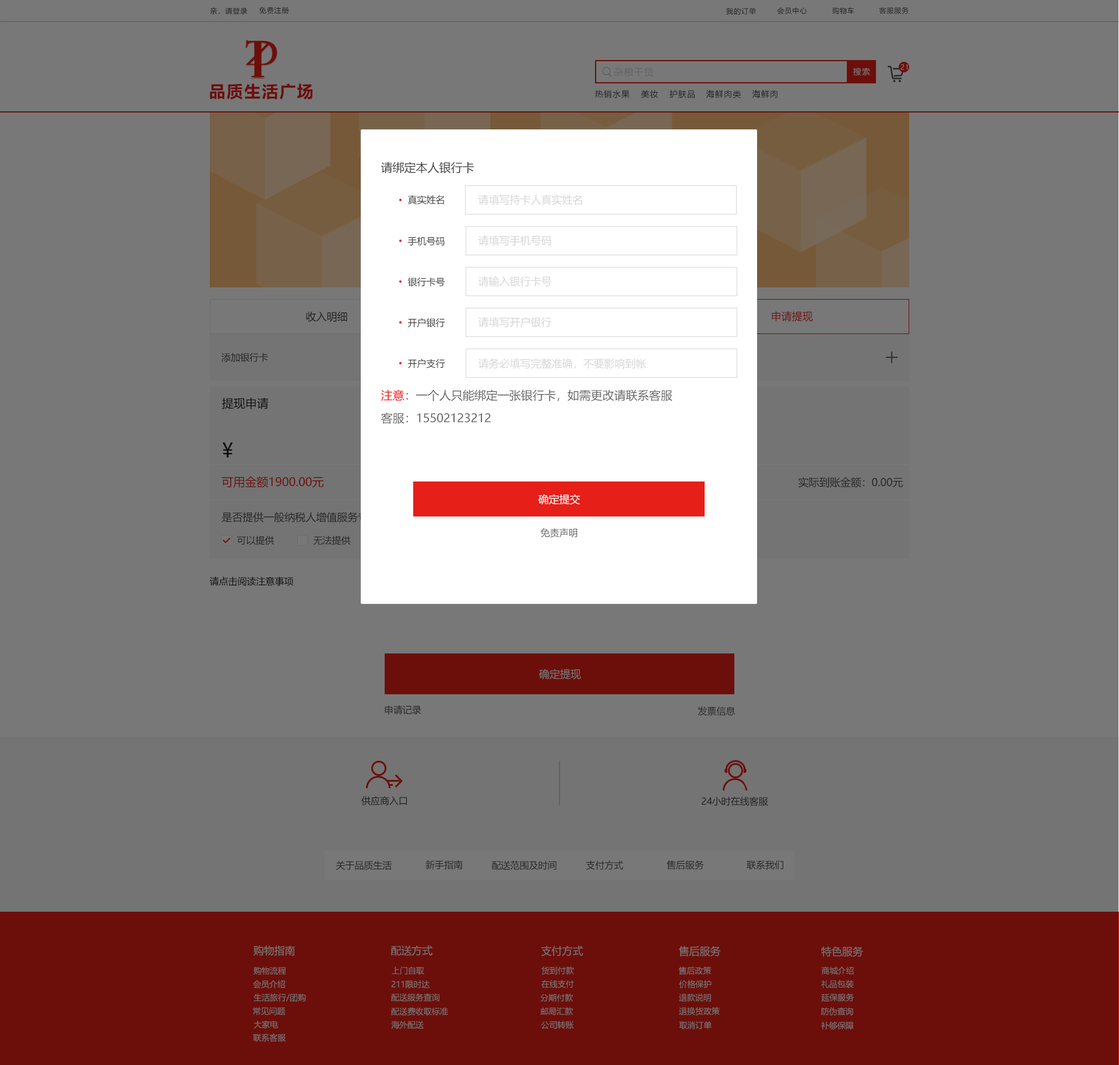
<style>
.page{position:relative;width:1119px;height:1065px;background:#787878}
.page>*{position:absolute;margin:0}
.t1{font:7px "MicrosoftYaHei";letter-spacing:0.08em;color:#1e1e1e}
.t2{font:7px "MicrosoftYaHei";letter-spacing:0.08em;color:#787878}
.t3{font:9.3px "MicrosoftYaHei";letter-spacing:0.08em;color:#656565}
.t4{font:8.2px "MicrosoftYaHei";letter-spacing:0.08em;color:#787878}
.t5{font:16.3px "MicrosoftYaHei-Bold";letter-spacing:0.08em;color:#6c0f0b}
.t6{font:8.2px "MicrosoftYaHei";letter-spacing:0.08em;color:#1e1e1e}
.t7{font:11.7px "MicrosoftYaHei";color:#404040;text-transform:uppercase}
.t8{font:9.3px "MicrosoftYaHei";color:#404040;text-transform:uppercase}
.t9{font:10.5px "MicrosoftYaHei";color:#d6d6d6;text-transform:uppercase}
.t10{font:10.5px "MicrosoftYaHei";color:#1e1e1e}
.t11{font:10.5px "MicrosoftYaHei";color:#6c0f0b}
.t12{font:9.3px "MicrosoftYaHei";color:#262626}
.t13{font:11.7px "MicrosoftYaHei";color:#666666;text-transform:uppercase}
.t14{font:11.7px "MicrosoftYaHei";color:#e61f18;text-transform:uppercase}
.t15{font:11.7px "MicrosoftYaHei";color:#202020}
.t16{font:19.8px "MicrosoftYaHei";color:#202020}
.t17{font:11.7px "MicrosoftYaHei";color:#6c0f0b}
.t18{font:10.5px "MicrosoftYaHei";color:#262626}
.t19{font:10.5px "MicrosoftYaHei";color:#ffffff;text-transform:uppercase}
.t20{font:9.3px "MicrosoftYaHei";color:#666666;text-transform:uppercase}
.t21{font:9.3px "MicrosoftYaHei";color:#202020}
.t22{font:10.5px "MicrosoftYaHei";color:#787878}
.t23{font:9.3px "MicrosoftYaHei";color:#1e1e1e}
.t24{font:8.2px "MicrosoftYaHei";color:#787878}
</style>
<div class="page">
<p class="t1" style="left:210px;top:7px;width:37px;height:8px">亲，请登录</p>
<p class="t1" style="left:259px;top:7px;width:30px;height:7px">免费注册</p>
<p class="t1" style="left:726px;top:8px;width:30px;height:7px">我的订单</p>
<p class="t1" style="left:777px;top:7px;width:31px;height:8px">会员中心</p>
<p class="t1" style="left:833px;top:7px;width:22px;height:8px">购物车</p>
<p class="t1" style="left:879px;top:7px;width:31px;height:7px">客服服务</p>
<p class="t2" style="left:901px;top:64px;width:7px;height:6px">21</p>
<p class="t3" style="left:614px;top:67px;width:40px;height:10px">杂粮干货</p>
<p class="t4" style="left:854px;top:68px;width:16px;height:8px">搜索</p>
<p class="t5" style="left:210px;top:83px;width:103px;height:17px">品质生活广场</p>
<p class="t6" style="left:595px;top:90px;width:35px;height:9px">热销水果</p>
<p class="t6" style="left:641px;top:90px;width:17px;height:8px">美妆</p>
<p class="t6" style="left:670px;top:90px;width:25px;height:9px">护肤品</p>
<p class="t6" style="left:706px;top:90px;width:36px;height:9px">海鲜肉类</p>
<p class="t6" style="left:752px;top:90px;width:26px;height:9px">海鲜肉</p>
<p class="t7" style="left:381px;top:162px;width:93px;height:12px">请绑定本人银行卡</p>
<p class="t8" style="left:408px;top:195px;width:36px;height:10px">真实姓名</p>
<p class="t9" style="left:478px;top:195px;width:104px;height:10px">请填写持卡人真实姓名</p>
<p class="t8" style="left:408px;top:237px;width:37px;height:9px">手机号码</p>
<p class="t9" style="left:478px;top:236px;width:74px;height:10px">请填写手机号码</p>
<p class="t8" style="left:408px;top:277px;width:37px;height:10px">银行卡号</p>
<p class="t9" style="left:478px;top:276px;width:74px;height:11px">请输入银行卡号</p>
<p class="t10" style="left:306px;top:311px;width:41px;height:11px">收入明细</p>
<p class="t8" style="left:408px;top:318px;width:37px;height:10px">开户银行</p>
<p class="t9" style="left:478px;top:317px;width:74px;height:11px">请填写开户银行</p>
<p class="t11" style="left:772px;top:311px;width:41px;height:11px">申请提现</p>
<p class="t12" style="left:222px;top:353px;width:46px;height:9px">添加银行卡</p>
<p class="t8" style="left:408px;top:359px;width:37px;height:9px">开户支行</p>
<p class="t9" style="left:478px;top:358px;width:168px;height:11px">请务必填写完整准确，不要影响到帐</p>
<p class="t13" style="left:381px;top:389px;width:292px;height:12px"><span class="t14">注意：</span>一个人只能绑定一张银行卡，如需更改请联系客服</p>
<p class="t15" style="left:222px;top:398px;width:47px;height:11px">提现申请</p>
<p class="t13" style="left:381px;top:412px;width:110px;height:12px">客服：15502123212</p>
<p class="t16" style="left:222px;top:443px;width:11px;height:15px">¥</p>
<p class="t17" style="left:222px;top:476px;width:102px;height:12px">可用金额1900.00元</p>
<p class="t18" style="left:799px;top:477px;width:105px;height:11px">实际到账金额：0.00元</p>
<p class="t19" style="left:538px;top:494px;width:42px;height:11px">确定提交</p>
<p class="t20" style="left:540px;top:528px;width:38px;height:10px">免责声明</p>
<p class="t12" style="left:237px;top:536px;width:38px;height:9px">可以提供</p>
<p class="t12" style="left:313px;top:536px;width:38px;height:9px">无法提供</p>
<p class="t21" style="left:210px;top:577px;width:84px;height:9px">请点击阅读注意事项</p>
<p class="t22" style="left:539px;top:669px;width:42px;height:11px">确定提现</p>
<p class="t12" style="left:385px;top:705px;width:37px;height:10px">申请记录</p>
<p class="t12" style="left:698px;top:707px;width:38px;height:9px">发票信息</p>
<p class="t23" style="left:361px;top:796px;width:46px;height:10px">供应商入口</p>
<p class="t23" style="left:702px;top:796px;width:66px;height:10px">24小时在线客服</p>
<p class="t12" style="left:336px;top:861px;width:56px;height:9px">关于品质生活</p>
<p class="t12" style="left:426px;top:860px;width:37px;height:10px">新手指南</p>
<p class="t12" style="left:492px;top:861px;width:65px;height:9px">配送范围及时间</p>
<p class="t12" style="left:586px;top:861px;width:38px;height:9px">支付方式</p>
<p class="t12" style="left:667px;top:861px;width:37px;height:9px">售后服务</p>
<p class="t12" style="left:747px;top:861px;width:37px;height:9px">联系我们</p>
<p class="t22" style="left:254px;top:946px;width:41px;height:10px">购物指南</p>
<p class="t22" style="left:391px;top:946px;width:42px;height:10px">配送方式</p>
<p class="t22" style="left:542px;top:946px;width:42px;height:10px">支付方式</p>
<p class="t22" style="left:679px;top:946px;width:42px;height:11px">售后服务</p>
<p class="t22" style="left:822px;top:946px;width:41px;height:11px">特色服务</p>
<p class="t24" style="left:254px;top:967px;width:32px;height:8px">购物流程</p>
<p class="t24" style="left:392px;top:967px;width:32px;height:8px">上门自取</p>
<p class="t24" style="left:542px;top:967px;width:32px;height:8px">货到付款</p>
<p class="t24" style="left:679px;top:967px;width:32px;height:8px">售后政策</p>
<p class="t24" style="left:822px;top:967px;width:32px;height:8px">商城介绍</p>
<p class="t24" style="left:253px;top:980px;width:32px;height:9px">会员介绍</p>
<p class="t24" style="left:391px;top:980px;width:39px;height:9px">211限时达</p>
<p class="t24" style="left:542px;top:980px;width:32px;height:8px">在线支付</p>
<p class="t24" style="left:679px;top:980px;width:33px;height:9px">价格保护</p>
<p class="t24" style="left:822px;top:980px;width:32px;height:8px">礼品包装</p>
<p class="t24" style="left:254px;top:993px;width:52px;height:9px">生活旅行/团购</p>
<p class="t24" style="left:391px;top:993px;width:49px;height:9px">配送服务查询</p>
<p class="t24" style="left:540px;top:993px;width:33px;height:9px">分期付款</p>
<p class="t24" style="left:679px;top:993px;width:32px;height:9px">退款说明</p>
<p class="t24" style="left:822px;top:993px;width:33px;height:9px">延保服务</p>
<p class="t24" style="left:253px;top:1007px;width:33px;height:9px">常见问题</p>
<p class="t24" style="left:391px;top:1007px;width:57px;height:9px">配送费收取标准</p>
<p class="t24" style="left:541px;top:1007px;width:32px;height:9px">邮局汇款</p>
<p class="t24" style="left:679px;top:1007px;width:41px;height:9px">退换货政策</p>
<p class="t24" style="left:822px;top:1007px;width:32px;height:9px">防伪查询</p>
<p class="t24" style="left:254px;top:1020px;width:24px;height:9px">大家电</p>
<p class="t24" style="left:391px;top:1021px;width:33px;height:8px">海外配送</p>
<p class="t24" style="left:541px;top:1021px;width:33px;height:9px">公司转账</p>
<p class="t24" style="left:679px;top:1021px;width:33px;height:9px">取消订单</p>
<p class="t24" style="left:822px;top:1021px;width:32px;height:9px">补够保障</p>
<p class="t24" style="left:253px;top:1034px;width:33px;height:8px">联系客服</p>
</div>
